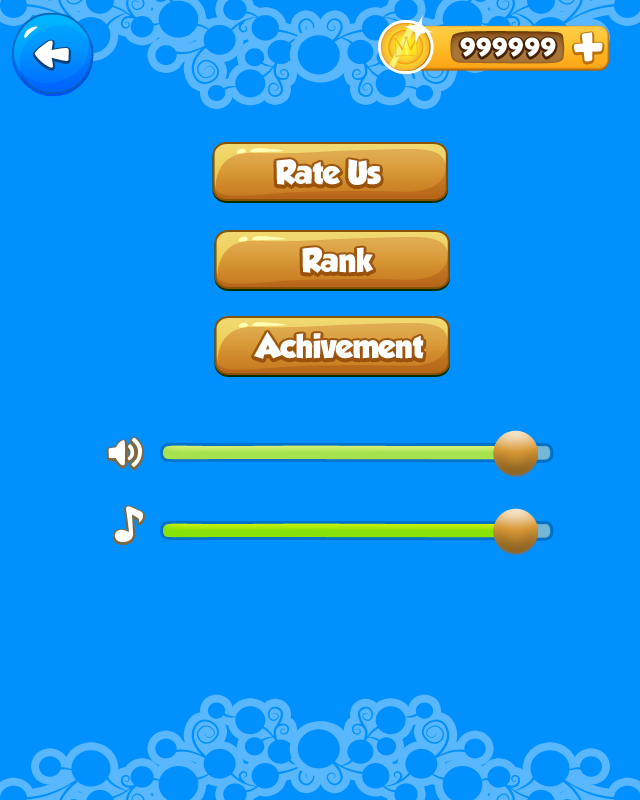
<style>
.page{position:relative;width:640px;height:800px;background:#0090ff}
.page>*{position:absolute;margin:0}
.t1{font:25px "Skranji-Bold";letter-spacing:0.025em;color:#ffffff}
.t2{font:30px "GROBOLD";letter-spacing:-0.02em;color:#ffffff}
</style>
<div class="page">
<p class="t1" style="left:460px;top:37px;width:96px;height:20px">999999</p>
<p class="t2" style="left:276px;top:159px;width:105px;height:26px">Rate Us</p>
<p class="t2" style="left:302px;top:247px;width:72px;height:26px">Rank</p>
<p class="t2" style="left:254px;top:331px;width:170px;height:28px">Achivement</p>
</div>
